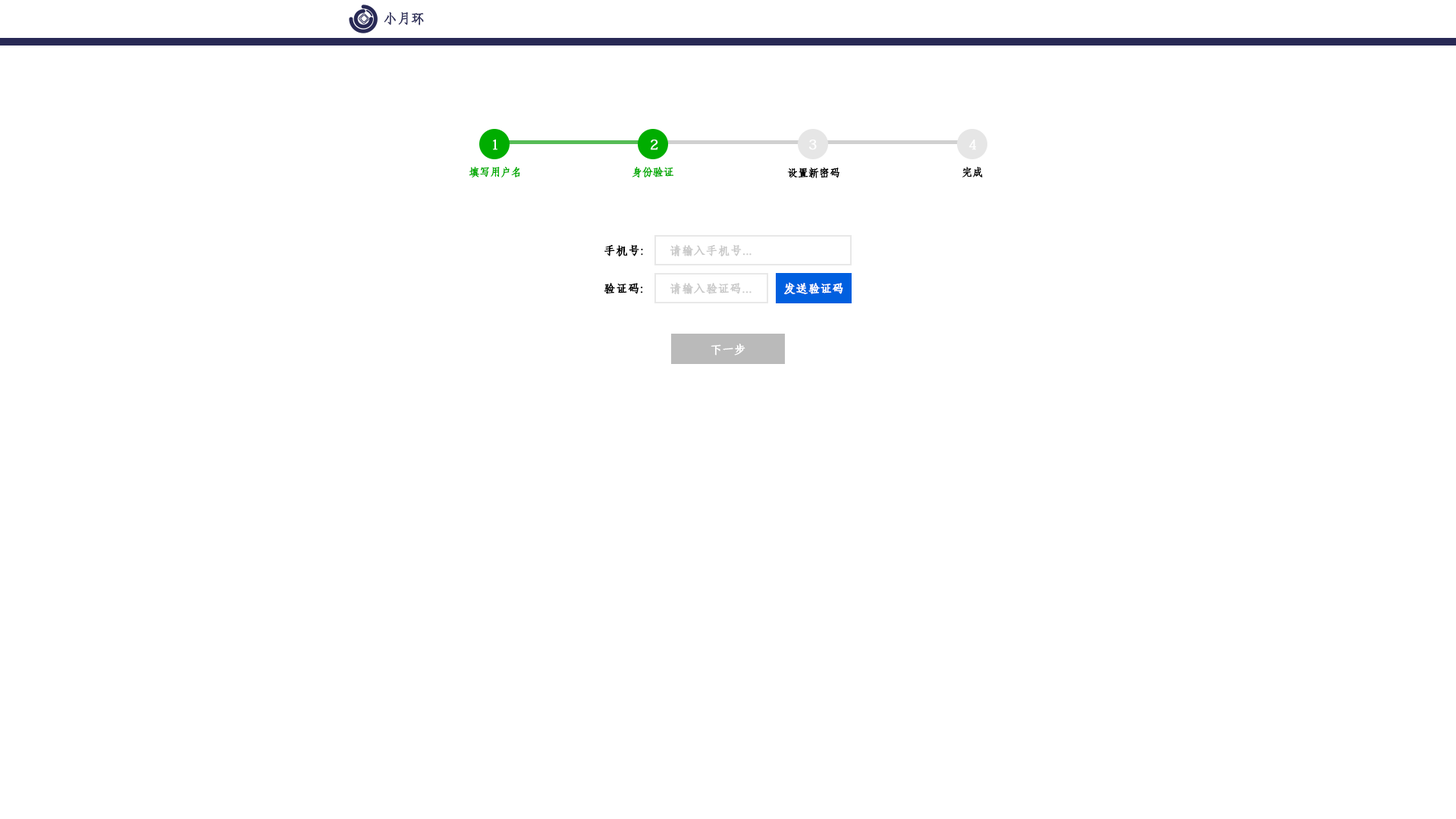
<style>
.page{position:relative;width:1456px;height:819px;background:#ffffff}
.page>*{position:absolute;margin:0}
.t1{font:13.4px "AdobeFangsongStd-Regular";color:#35365f;font-weight:bold}
.t2{font:13.6px "AdobeFangsongStd-Regular";color:#ffffff;font-weight:bold}
.t3{font:10.6px "AdobeFangsongStd-Regular";color:#00ad00;font-weight:bold}
.t4{font:10.6px "AdobeFangsongStd-Regular";color:#010101;font-weight:bold}
.t5{font:10.6px "AdobeFangsongStd-Regular";color:#000000;font-weight:bold}
.t6{font:11.4px "AdobeFangsongStd-Regular";color:#000000;font-weight:bold}
.t7{font:11.4px "AdobeFangsongStd-Regular";color:#cacaca;font-weight:bold}
.t8{font:11.4px "AdobeFangsongStd-Regular";color:#ffffff;font-weight:bold}
</style>
<div class="page">
<p class="t1" style="left:384px;top:12px;width:40px;height:14px">小月环</p>
<p class="t2" style="left:493px;top:139px;width:4px;height:11px">1</p>
<p class="t2" style="left:651px;top:140px;width:7px;height:10px">2</p>
<p class="t2" style="left:809px;top:140px;width:8px;height:10px">3</p>
<p class="t2" style="left:969px;top:140px;width:8px;height:10px">4</p>
<p class="t3" style="left:469px;top:167px;width:51px;height:11px">填写用户名</p>
<p class="t3" style="left:632px;top:167px;width:42px;height:11px">身份验证</p>
<p class="t4" style="left:787px;top:167px;width:52px;height:11px">设置新密码</p>
<p class="t5" style="left:962px;top:167px;width:21px;height:10px">完成</p>
<p class="t6" style="left:604px;top:245px;width:39px;height:12px">手机号:</p>
<p class="t7" style="left:670px;top:244px;width:81px;height:13px">请输入手机号...</p>
<p class="t6" style="left:604px;top:283px;width:39px;height:11px">验证码:</p>
<p class="t7" style="left:670px;top:282px;width:81px;height:12px">请输入验证码...</p>
<p class="t8" style="left:784px;top:282px;width:59px;height:12px">发送验证码</p>
<p class="t8" style="left:711px;top:344px;width:34px;height:12px">下一步</p>
</div>
